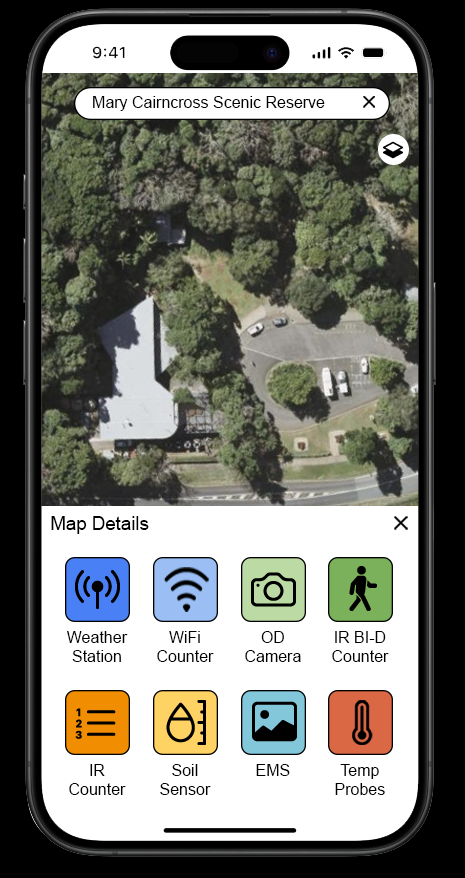
<style>
.page{position:relative;width:465px;height:878px;background:#ffffff}
.page>*{position:absolute;margin:0}
.t1{font:16px "ArialMT";color:#000000}
.t2{font:18.7px "ArialMT";color:#000000}
</style>
<div class="page">
<p class="t1" style="left:93px;top:96px;width:232px;height:15px">Mary Cairncross Scenic Reserve</p>
<p class="t2" style="left:51px;top:516px;width:98px;height:18px">Map Details</p>
<p class="t1" style="left:67px;top:631px;width:61px;height:31px;text-align:center">Weather<br>Station</p>
<p class="t1" style="left:157px;top:631px;width:57px;height:31px;text-align:center">WiFi<br>Counter</p>
<p class="t1" style="left:245px;top:631px;width:56px;height:31px;text-align:center">OD<br>Camera</p>
<p class="t1" style="left:332px;top:631px;width:57px;height:31px;text-align:center">IR BI-D<br>Counter</p>
<p class="t1" style="left:69px;top:764px;width:57px;height:31px;text-align:center">IR<br>Counter</p>
<p class="t1" style="left:160px;top:764px;width:51px;height:31px;text-align:center">Soil<br>Sensor</p>
<p class="t1" style="left:256px;top:764px;width:34px;height:12px">EMS</p>
<p class="t1" style="left:335px;top:764px;width:50px;height:31px;text-align:center">Temp<br>Probes</p>
</div>
